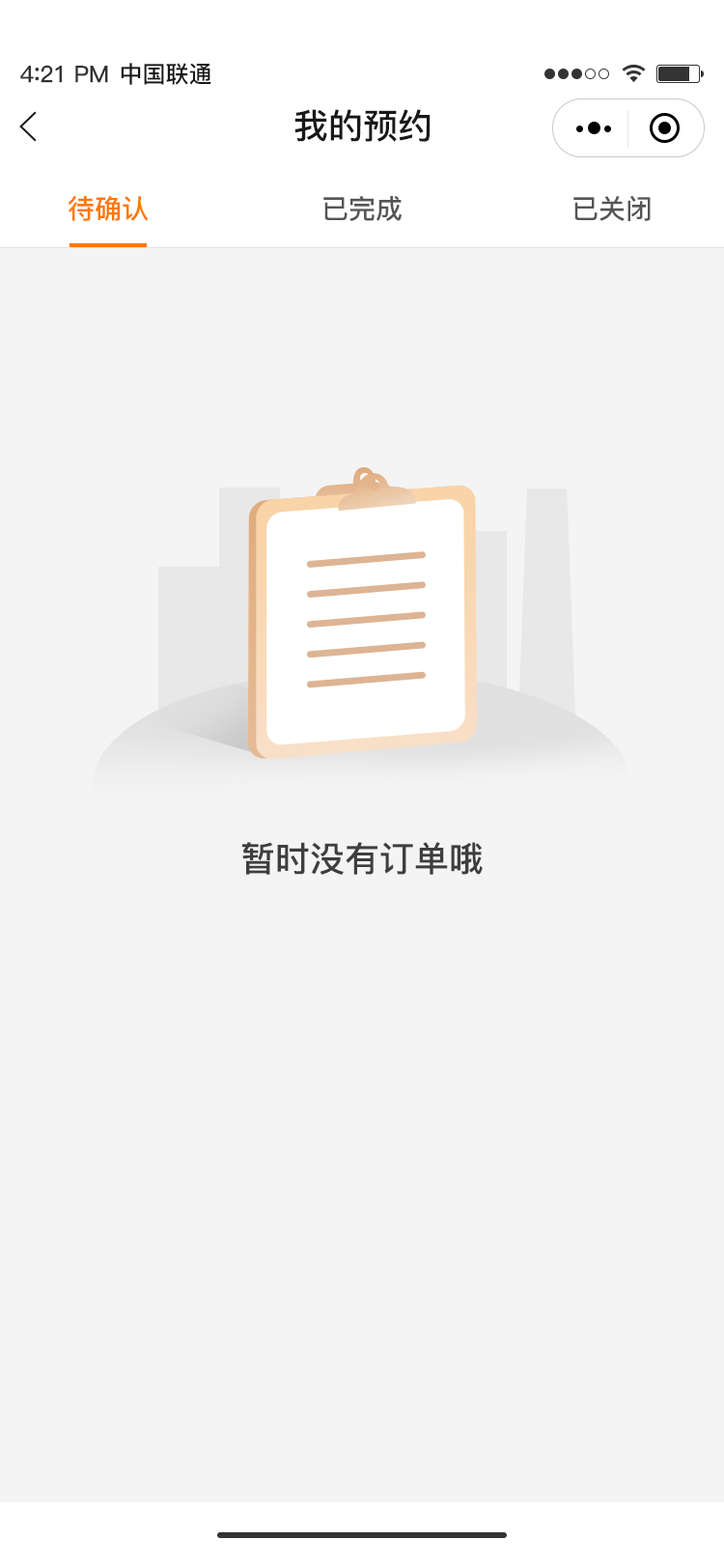
<style>
.page{position:relative;width:724px;height:1568px;background:#f4f4f4}
.page>*{position:absolute;margin:0}
.t1{font:23.2px "PingFang-SC-Bold";letter-spacing:-0.02em;color:#333333}
.t2{font:25.1px "PingFang-SC-Bold";letter-spacing:-0.02em;color:#333333}
.t3{font:23.2px "PingFang-SC-Bold";color:#181818}
.t4{font:34.8px "PingFang-SC-Bold";color:#181818}
.t5{font:27px "PingFang-SC-Bold";color:#ff7800}
.t6{font:27px "PingFang-SC-Bold";color:#555555}
.t7{font:34.8px "PingFang-SC-Bold";color:#3e3e3e}
</style>
<div class="page">
<p class="t1" style="left:20px;top:65px;width:88px;height:18px">4<span class="t2">:</span>21 PM</p>
<p class="t3" style="left:121px;top:63px;width:90px;height:22px">中国联通</p>
<p class="t4" style="left:294px;top:109px;width:137px;height:33px">我的预约</p>
<p class="t5" style="left:69px;top:195px;width:80px;height:26px">待确认</p>
<p class="t6" style="left:323px;top:195px;width:79px;height:26px">已完成</p>
<p class="t6" style="left:574px;top:195px;width:77px;height:26px">已关闭</p>
<p class="t7" style="left:242px;top:842px;width:241px;height:33px">暂时没有订单哦</p>
</div>
